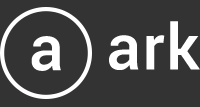
<style>
.page{position:relative;width:200px;height:107px;background:#333333}
.page>*{position:absolute;margin:0}
.t1{font:63px "Roboto-Medium";letter-spacing:0.03em;color:#ffffff}
</style>
<div class="page">
<p class="t1" style="left:109px;top:21px;width:91px;height:49px">ark</p>
<p class="t1" style="left:31px;top:36px;width:30px;height:35px">a</p>
</div>
